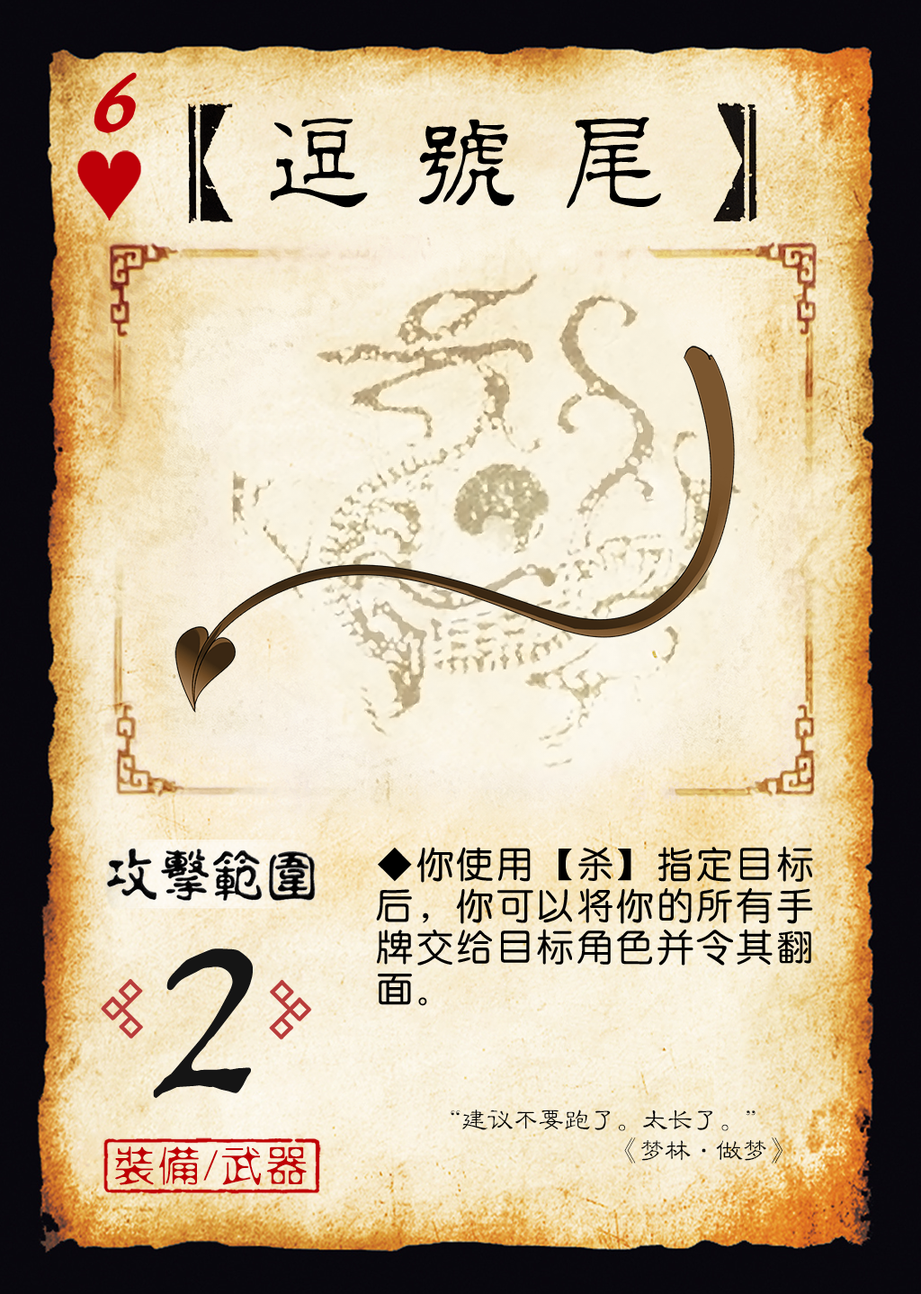
<style>
.page{position:relative;width:921px;height:1294px}
.page>*{position:absolute;margin:0}
.t1{font:110.9px "HYi1gf";color:#be0008;font-weight:bold;font-style:italic}
.t2{font:110.9px "¾­µä·±½ÇÁ¥ Regular";letter-spacing:0.33em;color:#000000}
.t3{font:37.5px/41.2px "HYe3gj";color:#000000}
.t4{font:284.8px "HYi1gf";color:#151515}
.t5{font:27.1px "FZLBJW--GB1-0";letter-spacing:-0.05em;color:#000000}
.t6{font:41.4px "FZXSHFW--GB1-0";letter-spacing:0.08em;color:#bf0004}
</style>
<div class="page">
<p class="t1" style="left:94px;top:72px;width:43px;height:61px">6</p>
<p class="t2" style="left:270px;top:117px;width:391px;height:92px">逗号尾</p>
<p class="t3" style="left:376px;top:846px;width:437px;height:160px;text-align:justify">◆你使用【杀】指定目标后，你可以将你的所有手牌交给目标角色并令其翻面。</p>
<p class="t4" style="left:153px;top:948px;width:100px;height:151px">2</p>
<p class="t5" style="left:451px;top:1110px;width:305px;height:21px">“建议不要跑了。太长了。”</p>
<p class="t6" style="left:115px;top:1146px;width:192px;height:39px">装备/武器</p>
<p class="t5" style="left:625px;top:1137px;width:158px;height:27px">《梦林·做梦》</p>
</div>
